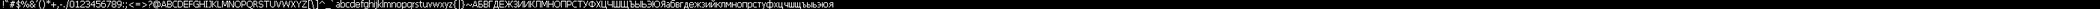
<style>
.page{position:relative;width:2100px;height:9px;background:#000000}
.page>*{position:absolute;margin:0}
.t1{font:9px "Tahoma";color:#ffffff}
</style>
<div class="page">
<p class="t1" style="left:3px;top:0px;width:830px;height:9px">!“#$%&amp;’()*+,-./0123456789:;&lt;=&gt;?@ABCDEFGHIJKLMNOPQRSTUVWXYZ[\]^_`abcdefghijklmnopqrstuvwxyz{|}~АБВГДЕЖЗИЙКЛМНОПРСТУФХЦЧШЩЪЫЬЭЮЯабвгдежзийклмнопрстуфхцчшщъыьэюя</p>
</div>
